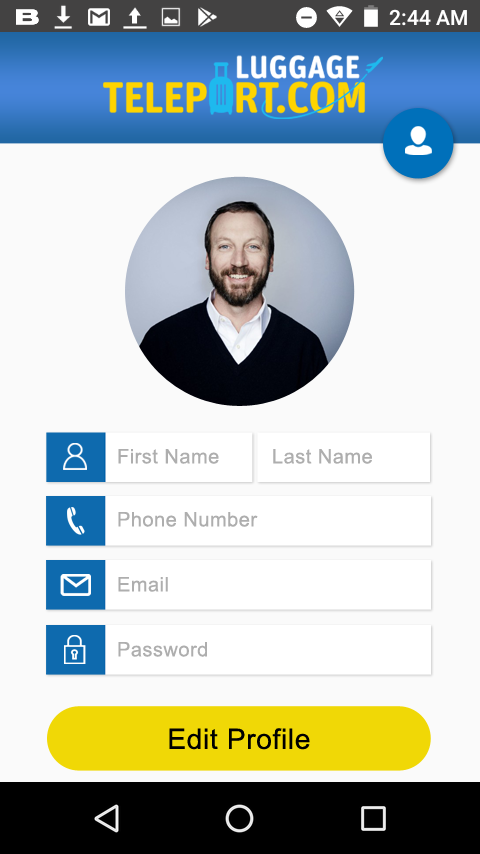
<style>
.page{position:relative;width:480px;height:854px;background:#fafafa}
.page>*{position:absolute;margin:0}
.t1{font:20px "ArialMT";letter-spacing:0.025em;color:#aeaeae}
.t2{font:28px "ArialMT";letter-spacing:0.025em;color:#000000}
</style>
<div class="page">
<p class="t1" style="left:118px;top:449px;width:101px;height:15px">First Name</p>
<p class="t1" style="left:273px;top:449px;width:99px;height:15px">Last Name</p>
<p class="t1" style="left:118px;top:512px;width:140px;height:15px">Phone Number</p>
<p class="t1" style="left:118px;top:577px;width:50px;height:15px">Email</p>
<p class="t1" style="left:118px;top:642px;width:89px;height:15px">Password</p>
<p class="t2" style="left:169px;top:728px;width:141px;height:22px">Edit Profile</p>
</div>
